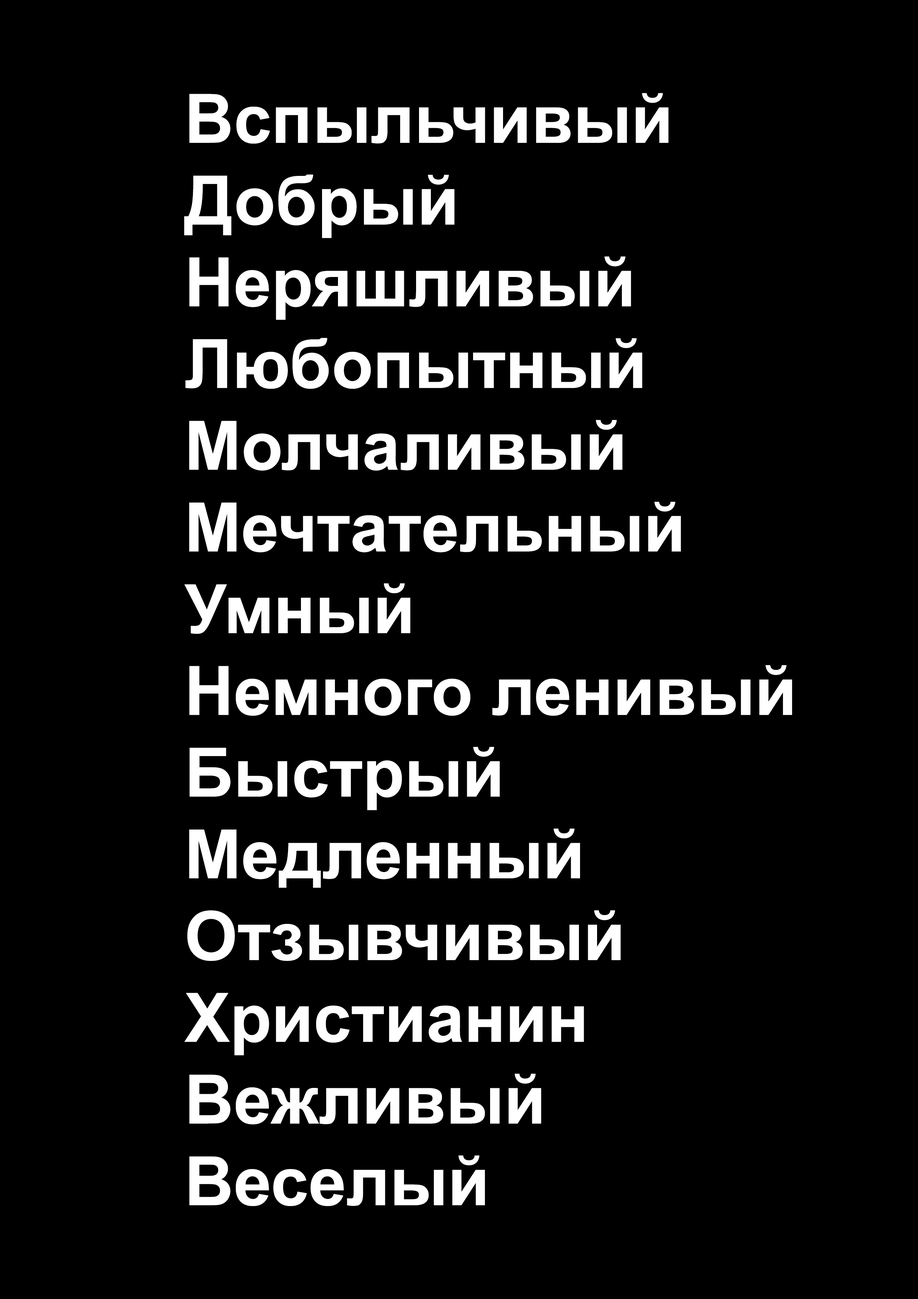
<style>
.page{position:relative;width:918px;height:1299px;background:#000000}
.page>*{position:absolute;margin:0}
.t1{font:68.1px "Arial-BoldMT";color:#ffffff}
</style>
<div class="page">
<p class="t1" style="left:184px;top:93px;width:608px;height:1113px">Вспыльчивый<br>Добрый<br>Неряшливый<br>Любопытный<br>Молчаливый<br>Мечтательный<br>Умный<br>Немного ленивый<br>Быстрый <br>Медленный<br>Отзывчивый<br>Христианин<br>Вежливый<br>Веселый</p>
</div>
